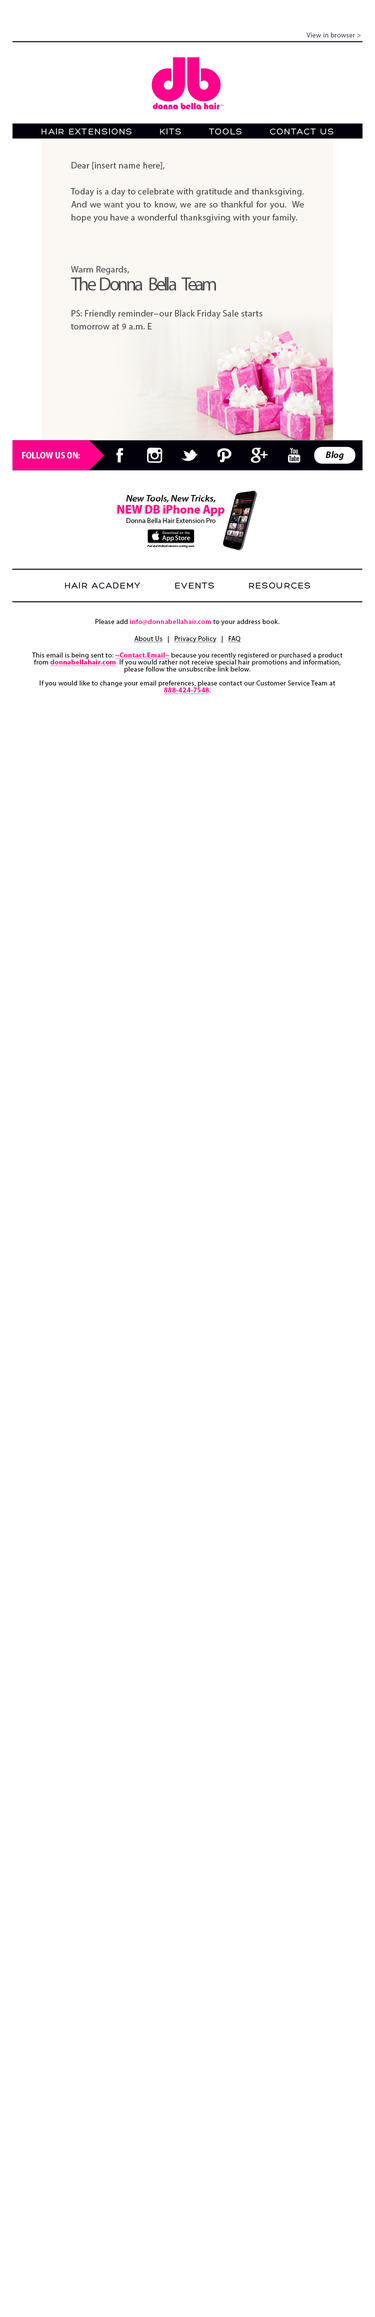
<style>
.page{position:relative;width:375px;height:2317px;background:#ffffff}
.page>*{position:absolute;margin:0}
.t1{font:7px "MyriadPro-Regular";letter-spacing:0.025em;color:#4d4d4f}
.t2{font:9px "Hero";letter-spacing:0.1em;color:#ffffff}
.t3{font:9px/13px "MyriadPro-Regular";letter-spacing:0.025em;color:#4d4d4f}
.t4{font:19px/18px "MyriadPro-Regular";letter-spacing:-0.1em;color:#4d4d4f}
.t5{font:9px "MyriadPro-BoldSemiCn";color:#ffffff}
.t6{font:9.3px "MyriadPro-BoldIt";color:#01000b}
.t7{font:9px "MyriadPro-SemiboldSemiExtIt";color:#000000}
.t8{font:12px "MyriadPro-Bold";color:#ff008c}
.t9{font:7px "MyriadPro-Regular";color:#000000}
.t10{font:3px "MyriadPro-It";color:#000000}
.t11{font:9px "Hero";letter-spacing:0.1em;color:#01000b}
.t12{font:7px/7px "MyriadPro-Regular";letter-spacing:0.025em;color:#000000}
.t13{font:7px "MyriadPro-Regular";letter-spacing:0.025em;color:#000000}
.t14{font:7px "MyriadPro-Semibold";letter-spacing:0.025em;color:#ff008c}
.t15{font:7px "MyriadPro-Regular";letter-spacing:0.025em;color:#000000;text-decoration:underline}
.t16{font:7px "MyriadPro-Bold";letter-spacing:0.025em;color:#ff008c;text-decoration:underline}
.t17{font:7px/7px "MyriadPro-Bold";letter-spacing:0.025em;color:#ff008c;text-decoration:underline}
</style>
<div class="page">
<p class="t1" style="left:306px;top:32px;width:55px;height:6px">View in browser &gt;</p>
<p class="t2" style="left:42px;top:128px;width:292px;height:7px">HAIR EXTENSIONS        KITS        TOOLS        CONTACT US</p>
<p class="t3" style="left:70px;top:162px;width:234px;height:168px;text-align:justify">Dear [insert name here],<br><br>Today is a day to celebrate with gratitude and thanksgiving. And we want you to know, we are so thankful for you.  We hope you have a wonderful thanksgiving with your family.<br><br><br><br>Warm Regards,<br><span class="t4">The  Donna   Bella   Team<br></span><br>PS: Friendly reminder­­−our Black Friday Sale starts <br>tomorrow at 9 a.m. E</p>
<p class="t5" style="left:22px;top:452px;width:58px;height:6px">FOLLOW US ON:</p>
<p class="t6" style="left:326px;top:451px;width:18px;height:9px">Blog</p>
<p class="t7" style="left:126px;top:495px;width:90px;height:7px">New Tools, New Tricks,</p>
<p class="t8" style="left:118px;top:505px;width:106px;height:11px">NEW DB iPhone App</p>
<p class="t9" style="left:126px;top:518px;width:90px;height:5px">Donna Bella Hair Extension Pro</p>
<p class="t10" style="left:147px;top:544px;width:47px;height:4px">iPad and Android versions coming soon.</p>
<p class="t11" style="left:65px;top:582px;width:245px;height:7px">HAIR ACADEMY          EVENTS          RESOURCES</p>
<p class="t12" style="left:32px;top:619px;width:310px;height:75px;text-align:center"><span class="t13">Please add </span><span class="t14">info@donnabellahair.com</span><span class="t13"> to your address book.<br><br></span><span class="t15">About Us</span><span class="t13">   |   </span><span class="t15">Privacy Policy</span><span class="t13">   |   </span><span class="t15">FAQ<br></span><span class="t13"><br>This email is being sent to: </span><span class="t16">~Contact.Email~</span><span class="t13"> because you recently registered </span>or purchased a product from <span class="t17">donnabellahair.com</span>  If you would rather not receive special hair promotions and information, please follow the unsubscribe link below.<br><br>If you would like to change your email preferences, please contact our Customer Service Team at <span class="t17">888-424-7548</span>.</p>
</div>
